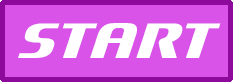
<style>
.page{position:relative;width:233px;height:82px;background:#d953e9}
.page>*{position:absolute;margin:0}
.t1{font:56.4px "Motorwerk";color:#ffffff}
</style>
<div class="page">
<p class="t1" style="left:18px;top:23px;width:203px;height:35px">Start</p>
</div>
